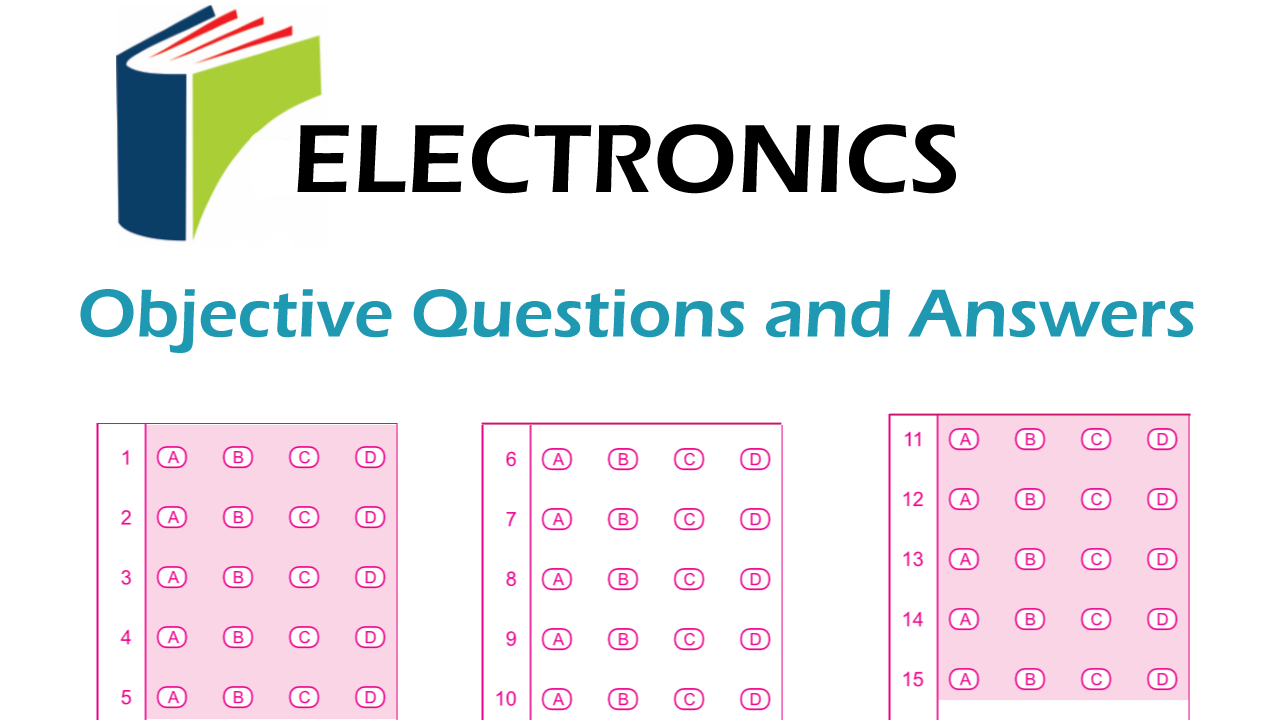
<style>
.page{position:relative;width:1280px;height:720px;background:#ffffff}
.page>*{position:absolute;margin:0}
.t1{font:100px "ErasITC-Demi";color:#000000}
.t2{font:70px "ErasITC-Demi";color:#1f98b2}
</style>
<div class="page">
<p class="t1" style="left:297px;top:124px;width:659px;height:70px">ELECTRONICS</p>
<p class="t2" style="left:80px;top:289px;width:1114px;height:64px">Objective Questions and Answers</p>
</div>
